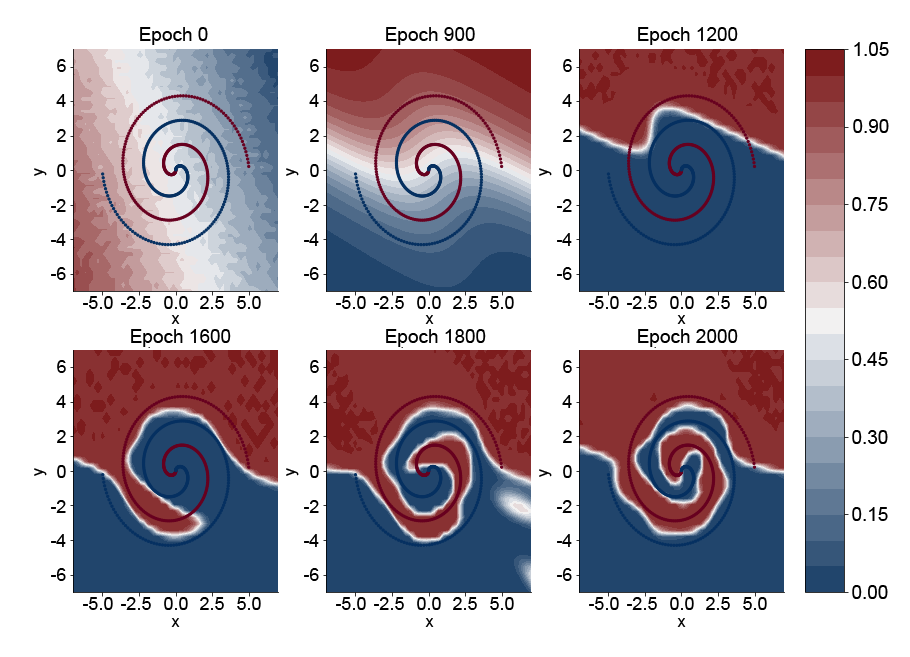
<style>
.page{position:relative;width:910px;height:657px;background:#ffffff}
.page>*{position:absolute;margin:0}
.t1{font:19px "ArialMT";color:#000000}
.t2{font:18px "ArialMT";color:#000000}
.t3{font:16px "ArialMT";color:#000000}
</style>
<div class="page">
<p class="t1" style="left:140px;top:27px;width:68px;height:18px">Epoch 0</p>
<p class="t1" style="left:386px;top:27px;width:89px;height:18px">Epoch 900</p>
<p class="t1" style="left:638px;top:27px;width:100px;height:18px">Epoch 1200</p>
<p class="t1" style="left:854px;top:42px;width:35px;height:14px">1.05</p>
<p class="t2" style="left:57px;top:59px;width:9px;height:13px">6</p>
<p class="t2" style="left:310px;top:59px;width:9px;height:13px">6</p>
<p class="t2" style="left:563px;top:59px;width:9px;height:13px">6</p>
<p class="t2" style="left:56px;top:94px;width:10px;height:13px">4</p>
<p class="t2" style="left:309px;top:94px;width:10px;height:13px">4</p>
<p class="t2" style="left:562px;top:94px;width:10px;height:13px">4</p>
<p class="t1" style="left:853px;top:119px;width:36px;height:14px">0.90</p>
<p class="t2" style="left:57px;top:129px;width:9px;height:13px">2</p>
<p class="t2" style="left:310px;top:129px;width:9px;height:13px">2</p>
<p class="t2" style="left:563px;top:129px;width:9px;height:13px">2</p>
<p class="t3" style="left:34px;top:168px;width:13px;height:8px;rotate:-90deg">y</p>
<p class="t2" style="left:57px;top:164px;width:9px;height:13px">0</p>
<p class="t3" style="left:286px;top:168px;width:13px;height:8px;rotate:-90deg">y</p>
<p class="t2" style="left:310px;top:164px;width:9px;height:13px">0</p>
<p class="t3" style="left:539px;top:168px;width:13px;height:8px;rotate:-90deg">y</p>
<p class="t2" style="left:563px;top:164px;width:9px;height:13px">0</p>
<p class="t1" style="left:852px;top:197px;width:36px;height:14px">0.75</p>
<p class="t2" style="left:51px;top:199px;width:15px;height:13px">-2</p>
<p class="t2" style="left:304px;top:199px;width:15px;height:13px">-2</p>
<p class="t2" style="left:557px;top:199px;width:15px;height:13px">-2</p>
<p class="t2" style="left:51px;top:233px;width:15px;height:13px">-4</p>
<p class="t2" style="left:304px;top:233px;width:15px;height:13px">-4</p>
<p class="t2" style="left:557px;top:233px;width:15px;height:13px">-4</p>
<p class="t2" style="left:51px;top:267px;width:15px;height:13px">-6</p>
<p class="t2" style="left:304px;top:267px;width:15px;height:13px">-6</p>
<p class="t2" style="left:557px;top:267px;width:15px;height:13px">-6</p>
<p class="t1" style="left:852px;top:275px;width:36px;height:14px">0.60</p>
<p class="t2" style="left:83px;top:296px;width:30px;height:13px">-5.0</p>
<p class="t2" style="left:121px;top:296px;width:30px;height:13px">-2.5</p>
<p class="t2" style="left:164px;top:296px;width:24px;height:13px">0.0</p>
<p class="t2" style="left:200px;top:296px;width:24px;height:13px">2.5</p>
<p class="t2" style="left:237px;top:296px;width:24px;height:13px">5.0</p>
<p class="t2" style="left:336px;top:296px;width:30px;height:13px">-5.0</p>
<p class="t2" style="left:374px;top:296px;width:30px;height:13px">-2.5</p>
<p class="t2" style="left:417px;top:296px;width:24px;height:13px">0.0</p>
<p class="t2" style="left:453px;top:296px;width:24px;height:13px">2.5</p>
<p class="t2" style="left:490px;top:296px;width:24px;height:13px">5.0</p>
<p class="t2" style="left:589px;top:296px;width:30px;height:13px">-5.0</p>
<p class="t2" style="left:627px;top:296px;width:30px;height:13px">-2.5</p>
<p class="t2" style="left:670px;top:296px;width:24px;height:13px">0.0</p>
<p class="t2" style="left:706px;top:296px;width:24px;height:13px">2.5</p>
<p class="t2" style="left:743px;top:296px;width:24px;height:13px">5.0</p>
<p class="t3" style="left:171px;top:315px;width:9px;height:9px">x</p>
<p class="t3" style="left:425px;top:315px;width:9px;height:9px">x</p>
<p class="t3" style="left:677px;top:315px;width:9px;height:9px">x</p>
<p class="t1" style="left:131px;top:329px;width:100px;height:18px">Epoch 1600</p>
<p class="t1" style="left:386px;top:329px;width:100px;height:18px">Epoch 1800</p>
<p class="t1" style="left:638px;top:329px;width:100px;height:18px">Epoch 2000</p>
<p class="t1" style="left:852px;top:352px;width:36px;height:14px">0.45</p>
<p class="t2" style="left:57px;top:360px;width:9px;height:13px">6</p>
<p class="t2" style="left:310px;top:360px;width:9px;height:13px">6</p>
<p class="t2" style="left:563px;top:360px;width:9px;height:13px">6</p>
<p class="t2" style="left:56px;top:395px;width:10px;height:13px">4</p>
<p class="t2" style="left:309px;top:395px;width:10px;height:13px">4</p>
<p class="t2" style="left:562px;top:395px;width:10px;height:13px">4</p>
<p class="t2" style="left:57px;top:430px;width:9px;height:13px">2</p>
<p class="t2" style="left:310px;top:430px;width:9px;height:13px">2</p>
<p class="t2" style="left:563px;top:430px;width:9px;height:13px">2</p>
<p class="t1" style="left:852px;top:430px;width:36px;height:14px">0.30</p>
<p class="t3" style="left:34px;top:468px;width:13px;height:8px;rotate:-90deg">y</p>
<p class="t2" style="left:57px;top:465px;width:9px;height:13px">0</p>
<p class="t3" style="left:286px;top:468px;width:13px;height:8px;rotate:-90deg">y</p>
<p class="t2" style="left:310px;top:465px;width:9px;height:13px">0</p>
<p class="t3" style="left:539px;top:469px;width:13px;height:8px;rotate:-90deg">y</p>
<p class="t2" style="left:563px;top:465px;width:9px;height:13px">0</p>
<p class="t2" style="left:51px;top:500px;width:15px;height:13px">-2</p>
<p class="t2" style="left:304px;top:500px;width:15px;height:13px">-2</p>
<p class="t2" style="left:557px;top:500px;width:15px;height:13px">-2</p>
<p class="t1" style="left:852px;top:507px;width:36px;height:14px">0.15</p>
<p class="t2" style="left:51px;top:534px;width:15px;height:13px">-4</p>
<p class="t2" style="left:304px;top:534px;width:15px;height:13px">-4</p>
<p class="t2" style="left:557px;top:534px;width:15px;height:13px">-4</p>
<p class="t2" style="left:51px;top:568px;width:15px;height:13px">-6</p>
<p class="t2" style="left:304px;top:568px;width:15px;height:13px">-6</p>
<p class="t2" style="left:557px;top:568px;width:15px;height:13px">-6</p>
<p class="t1" style="left:852px;top:585px;width:36px;height:14px">0.00</p>
<p class="t2" style="left:83px;top:597px;width:30px;height:13px">-5.0</p>
<p class="t2" style="left:121px;top:597px;width:30px;height:13px">-2.5</p>
<p class="t2" style="left:164px;top:597px;width:24px;height:13px">0.0</p>
<p class="t2" style="left:200px;top:597px;width:24px;height:13px">2.5</p>
<p class="t2" style="left:237px;top:597px;width:24px;height:13px">5.0</p>
<p class="t2" style="left:336px;top:597px;width:30px;height:13px">-5.0</p>
<p class="t2" style="left:374px;top:597px;width:30px;height:13px">-2.5</p>
<p class="t2" style="left:417px;top:597px;width:24px;height:13px">0.0</p>
<p class="t2" style="left:453px;top:597px;width:24px;height:13px">2.5</p>
<p class="t2" style="left:490px;top:597px;width:24px;height:13px">5.0</p>
<p class="t2" style="left:589px;top:597px;width:30px;height:13px">-5.0</p>
<p class="t2" style="left:627px;top:597px;width:30px;height:13px">-2.5</p>
<p class="t2" style="left:670px;top:597px;width:24px;height:13px">0.0</p>
<p class="t2" style="left:706px;top:597px;width:24px;height:13px">2.5</p>
<p class="t2" style="left:743px;top:597px;width:24px;height:13px">5.0</p>
<p class="t3" style="left:171px;top:618px;width:9px;height:9px">x</p>
<p class="t3" style="left:425px;top:618px;width:9px;height:9px">x</p>
<p class="t3" style="left:677px;top:618px;width:9px;height:9px">x</p>
</div>
